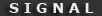
<style>
.page{position:relative;width:102px;height:16px;background:#333333}
.page>*{position:absolute;margin:0}
.t1{font:14px "Verdana-Bold";color:#ebebeb}
</style>
<div class="page">
<p class="t1" style="left:9px;top:3px;width:85px;height:10px">S I G N A L</p>
</div>
